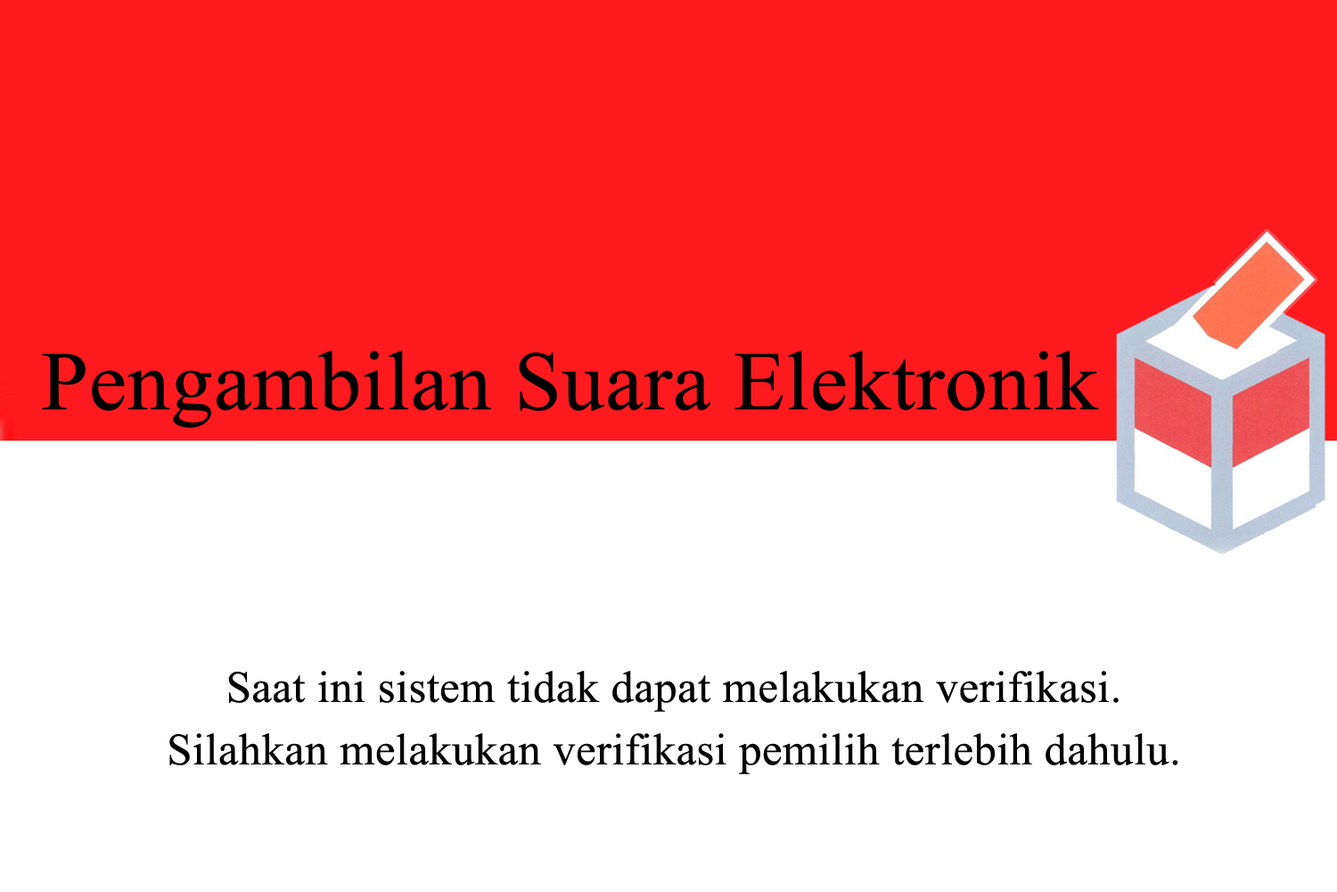
<style>
.page{position:relative;width:1337px;height:892px;background:#ffffff}
.page>*{position:absolute;margin:0}
.t1{font:83.8px "TimesNewRomanPSMT";letter-spacing:0.01em;color:#000000}
.t2{font:44.6px/62.4px "TimesNewRomanPSMT";letter-spacing:0.01em;color:#000000}
</style>
<div class="page">
<p class="t1" style="left:42px;top:350px;width:1057px;height:78px">Pengambilan Suara Elektronik</p>
<p class="t2" style="left:169px;top:670px;width:1010px;height:104px;text-align:center">Saat ini sistem tidak dapat melakukan verifikasi.<br>Silahkan melakukan verifikasi pemilih terlebih dahulu.</p>
</div>
